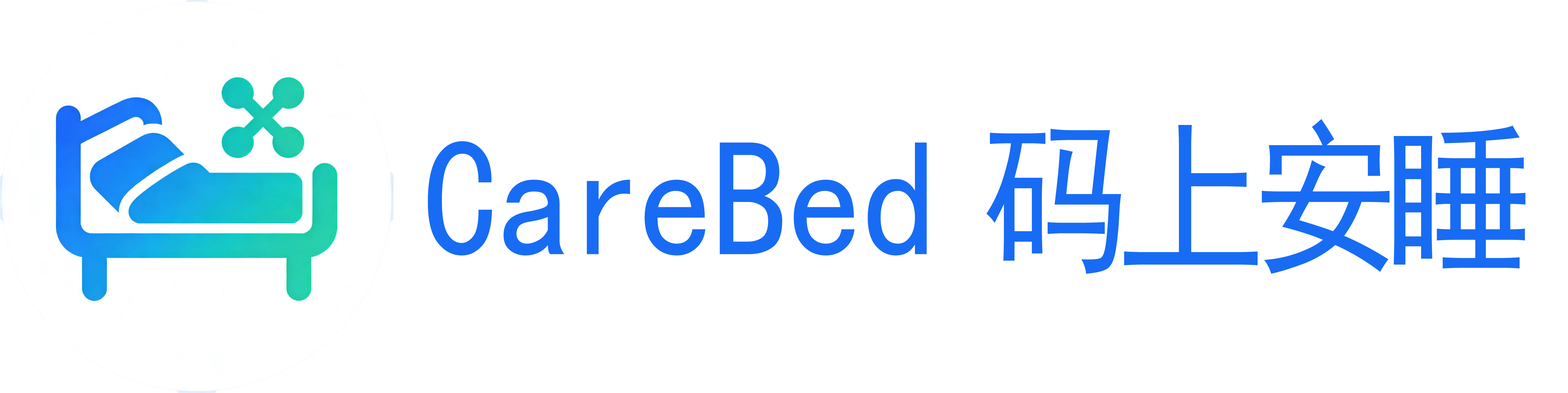
<style>
.page{position:relative;width:1568px;height:393px;background:#ffffff}
.page>*{position:absolute;margin:0}
.t1{font:167.1px "SimHei";color:#186cf3;scale:0.89 1}
.t2{font:167.1px "SimHei";letter-spacing:-0.05em;color:#186cf3;scale:0.89 1}
.t3{font:167.1px "SimHei";letter-spacing:-0.1em;color:#186cf3;scale:0.89 1}
</style>
<div class="page">
<p class="t1" style="left:428px;top:119px;width:1098px;height:155px">Ca<span class="t2">r</span>eBed <span class="t3">码上安睡</span></p>
</div>
